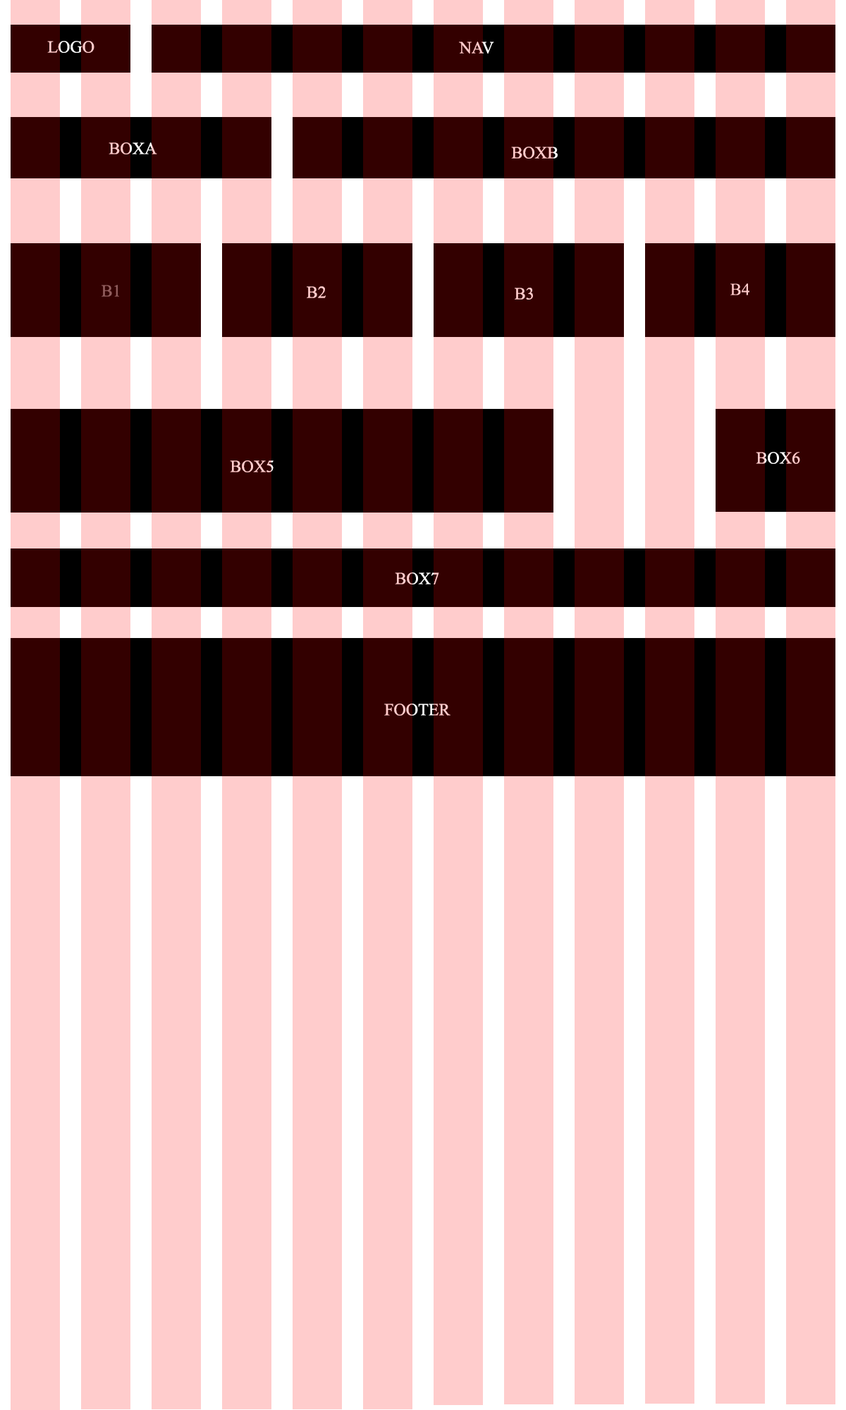
<style>
.page{position:relative;width:846px;height:1410px;background:#ffcccc}
.page>*{position:absolute;margin:0}
.t1{font:16.9px "TimesNewRomanPSMT"}
.t2{font:16.9px "TimesNewRomanPSMT";color:#ffcccc}
.t3{font:16.9px "TimesNewRomanPSMT";color:#905d5d}
</style>
<div class="page">
<p class="t1" style="left:47px;top:41px;width:47px;height:12px">LOGO</p>
<p class="t2" style="left:459px;top:42px;width:35px;height:12px">NAV</p>
<p class="t1" style="left:109px;top:142px;width:48px;height:12px">BOXA</p>
<p class="t2" style="left:511px;top:147px;width:47px;height:12px">BOXB</p>
<p class="t3" style="left:102px;top:285px;width:17px;height:12px">B1</p>
<p class="t2" style="left:307px;top:286px;width:19px;height:12px">B2</p>
<p class="t2" style="left:515px;top:288px;width:18px;height:12px">B3</p>
<p class="t2" style="left:230px;top:460px;width:43px;height:12px">BOX5</p>
<p class="t1" style="left:756px;top:452px;width:44px;height:12px">BOX6</p>
<p class="t1" style="left:395px;top:572px;width:44px;height:12px">BOX7</p>
<p class="t2" style="left:384px;top:703px;width:66px;height:12px">FOOTER</p>
</div>
